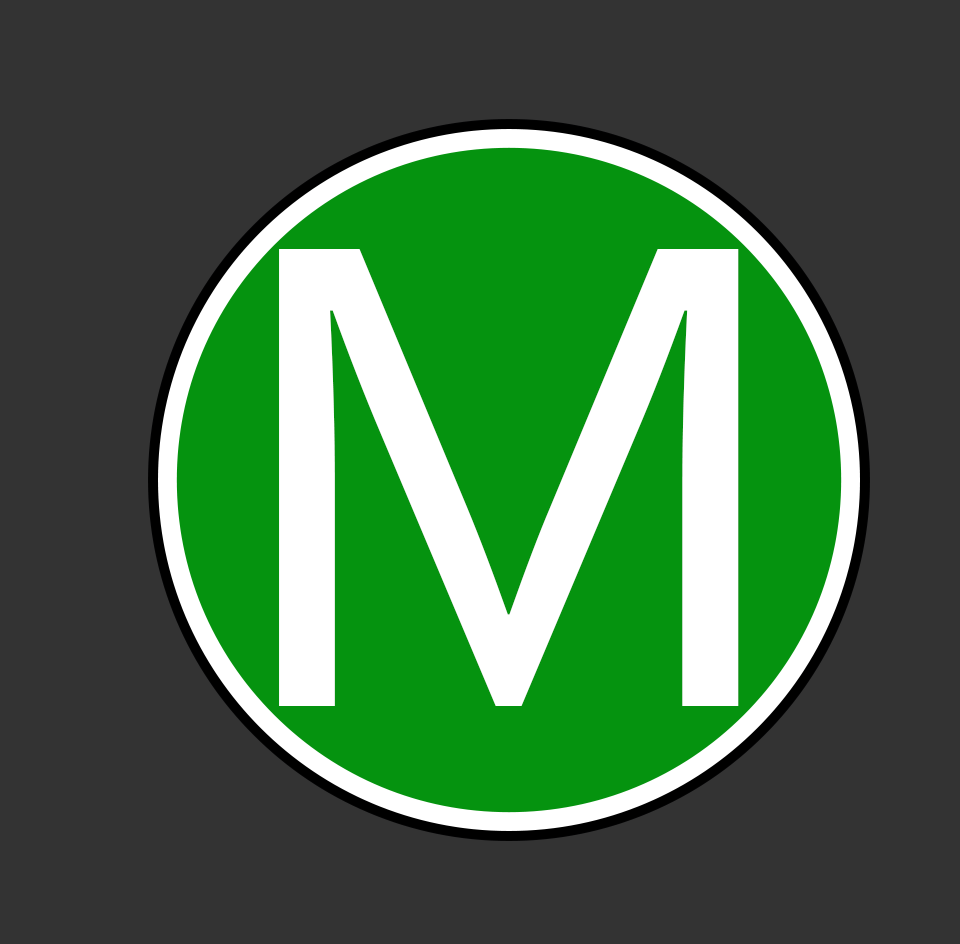
<style>
.page{position:relative;width:960px;height:944px;background:#333333}
.page>*{position:absolute;margin:0}
.t1{font:700px "Corbel";color:#ffffff}
</style>
<div class="page">
<p class="t1" style="left:279px;top:249px;width:460px;height:457px">M</p>
</div>
